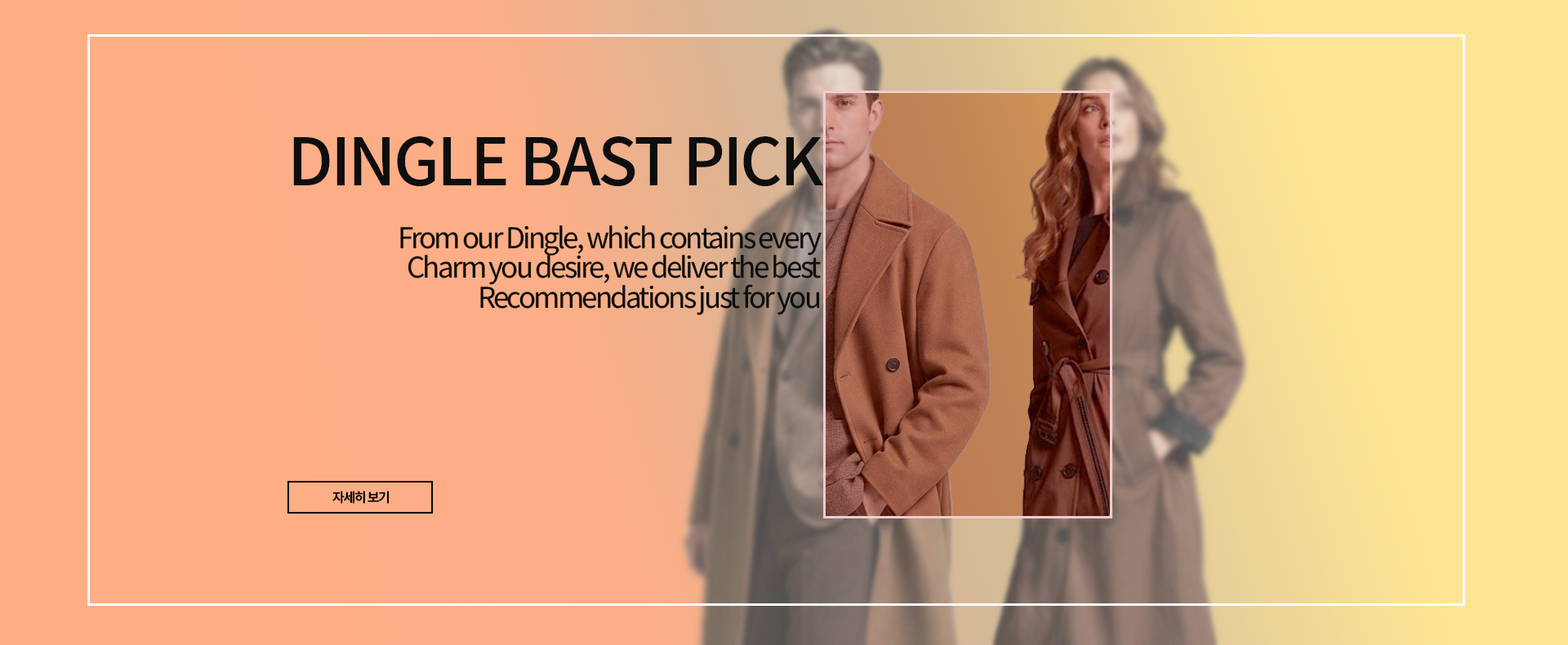
<style>
.page{position:relative;width:1568px;height:645px}
.page>*{position:absolute;margin:0}
.t1{font:65.3px "NotoSansKR-Medium";letter-spacing:-0.04em;color:#0e0e0e;font-weight:bold}
.t2{font:28.6px "NotoSansKR-Regular";letter-spacing:-0.08em;color:#0e0e0e;font-weight:bold}
.t3{font:13.1px "NotoSansKR-Medium";letter-spacing:-0.08em;color:#000000;font-weight:bold}
</style>
<div class="page">
<p class="t1" style="left:293px;top:136px;width:530px;height:50px">DINGLE BAST PICK</p>
<p class="t2" style="left:400px;top:225px;width:422px;height:31px">From our Dingle, which contains every</p>
<p class="t2" style="left:408px;top:255px;width:413px;height:30px">Charm you desire, we deliver the best</p>
<p class="t2" style="left:480px;top:284px;width:340px;height:31px">Recommendations just for you</p>
<p class="t3" style="left:332px;top:491px;width:57px;height:13px">자세히 보기</p>
</div>
